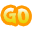
<style>
.page{position:relative;width:32px;height:32px;background:#ffffff}
.page>*{position:absolute;margin:0}
.t1{font:18px "CosmicTwoPlain";letter-spacing:-0.01em;font-weight:bold}
</style>
<div class="page">
<p class="t1" style="left:3px;top:7px;width:26px;height:17px">GO</p>
</div>
